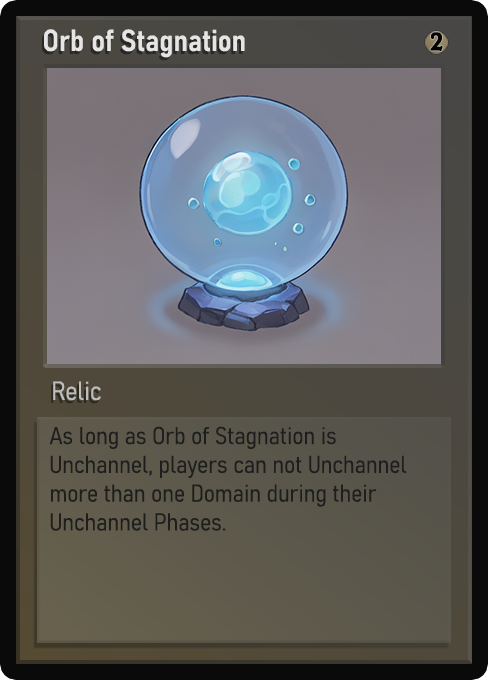
<style>
.page{position:relative;width:488px;height:680px}
.page>*{position:absolute;margin:0}
.t1{font:30px "Bahnschrift-SemiBoldSemiCondensed";color:#f2f2f2;font-weight:bold}
.t2{font:25px "WTRRoycroft";color:#000000;font-weight:bold;scale:1.09 1}
.t3{font:26px "Bahnschrift-LightSemiCondensed";color:#c8c8c8;font-weight:bold}
.t4{font:24px "Bahnschrift-LightSemiCondensed";color:#1e1e1e;font-weight:bold}
</style>
<div class="page">
<p class="t1" style="left:44px;top:29px;width:201px;height:29px;opacity:0.9">Orb of Stagnation</p>
<p class="t2" style="left:430px;top:32px;width:13px;height:19px">2</p>
<p class="t3" style="left:53px;top:381px;width:48px;height:20px;opacity:0.9">Relic</p>
<p class="t4" style="left:49px;top:426px;width:358px;height:105px">As long as Orb of Stagnation is Unchannel, players can not Unchannel more than one Domain during their Unchannel Phases.</p>
</div>
